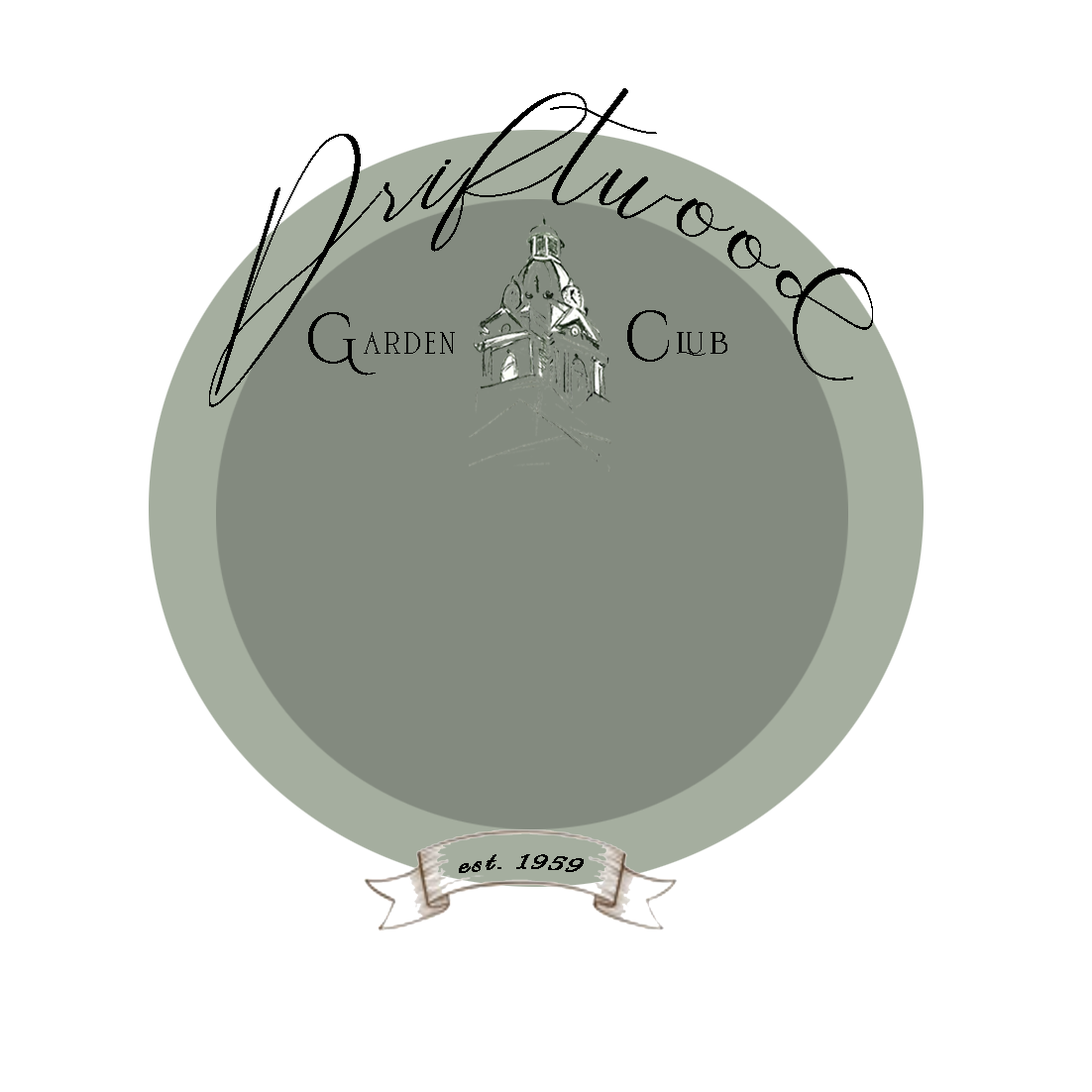
<style>
.page{position:relative;width:1092px;height:1092px;background:#ffffff}
.page>*{position:absolute;margin:0}
.t1{font:76.4px "Bathey";letter-spacing:0.078em;color:#000000;scale:0.93 1}
.t2{font:76.5px "Bathey";letter-spacing:0.078em;color:#000000;scale:0.93 1}
.t3{font:71px "CinzelDecorative-Regular";letter-spacing:0.078em;color:#000000;scale:0.9 1}
.t4{font:35.1px "DeBambeet";letter-spacing:0.078em;color:#000000;scale:1.22 1}
.t5{font:35.1px "DeBambeet";letter-spacing:0.078em;color:#000000;scale:1.47 1}
.t6{font:31.2px "Italianno-Regular";letter-spacing:0.078em;color:#000000;scale:1.24 1}
</style>
<div class="page">
<p class="t1" style="left:209px;top:88px;width:664px;height:319px;rotate:6deg"><span class="t2">D</span>riftwood</p>
<p class="t3" style="left:308px;top:312px;width:68px;height:64px">G</p>
<p class="t3" style="left:627px;top:310px;width:42px;height:52px">c</p>
<p class="t4" style="left:364px;top:332px;width:91px;height:22px">arden</p>
<p class="t5" style="left:677px;top:332px;width:50px;height:24px">lub</p>
<p class="t6" style="left:459px;top:854px;width:125px;height:19px">est. 1959</p>
</div>
